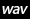
<style>
.page{position:relative;width:30px;height:19px;background:#000000}
.page>*{position:absolute;margin:0}
.t1{font:15.4px "MyriadPro-Regular";letter-spacing:-0.025em;color:#ffffff;font-style:italic}
</style>
<div class="page">
<p class="t1" style="left:2px;top:6px;width:26px;height:8px">wav</p>
</div>
